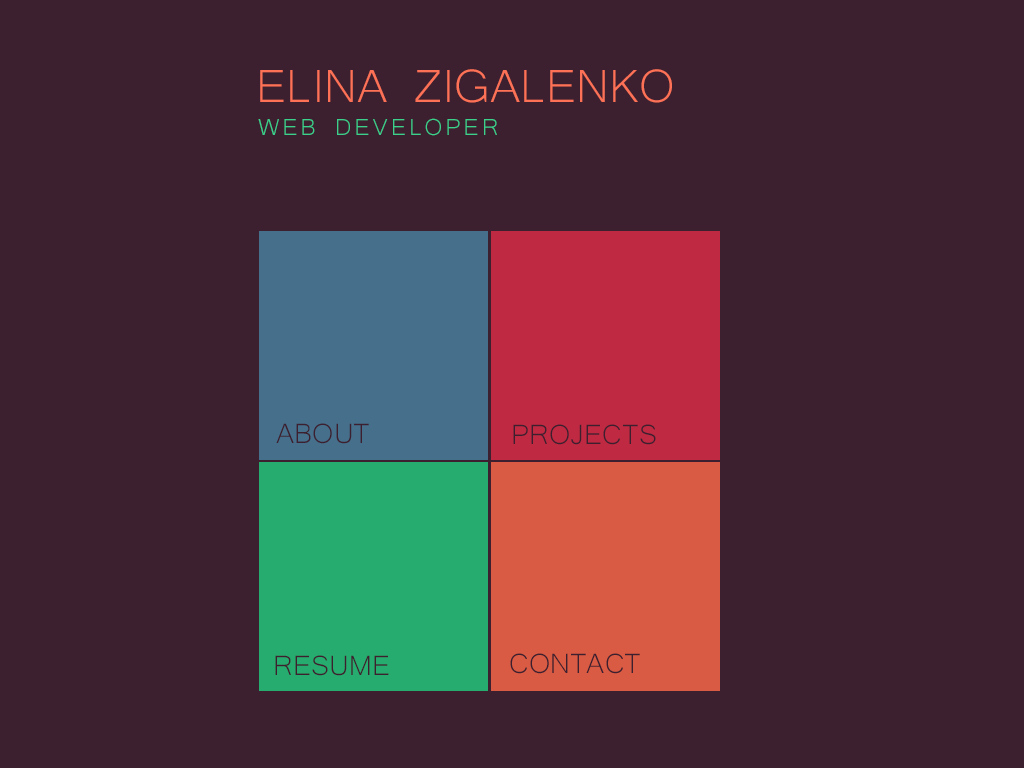
<style>
.page{position:relative;width:1024px;height:768px;background:#3c202f}
.page>*{position:absolute;margin:0}
.t1{font:60px "Microsoft-Yi-Baiti";color:#fd7156}
.t2{font:30px "Microsoft-Yi-Baiti";letter-spacing:0.1em;color:#3bd08c}
.t3{font:36px "Microsoft-Yi-Baiti";color:#3c202f}
</style>
<div class="page">
<p class="t1" style="left:260px;top:69px;width:412px;height:34px">ELINA ZIGALENKO</p>
<p class="t2" style="left:258px;top:118px;width:239px;height:18px">WEB DEVELOPER</p>
<p class="t3" style="left:276px;top:423px;width:93px;height:21px">ABOUT</p>
<p class="t3" style="left:513px;top:424px;width:143px;height:21px">PROJECTS</p>
<p class="t3" style="left:510px;top:653px;width:130px;height:21px">CONTACT</p>
<p class="t3" style="left:275px;top:655px;width:114px;height:21px">RESUME</p>
</div>
